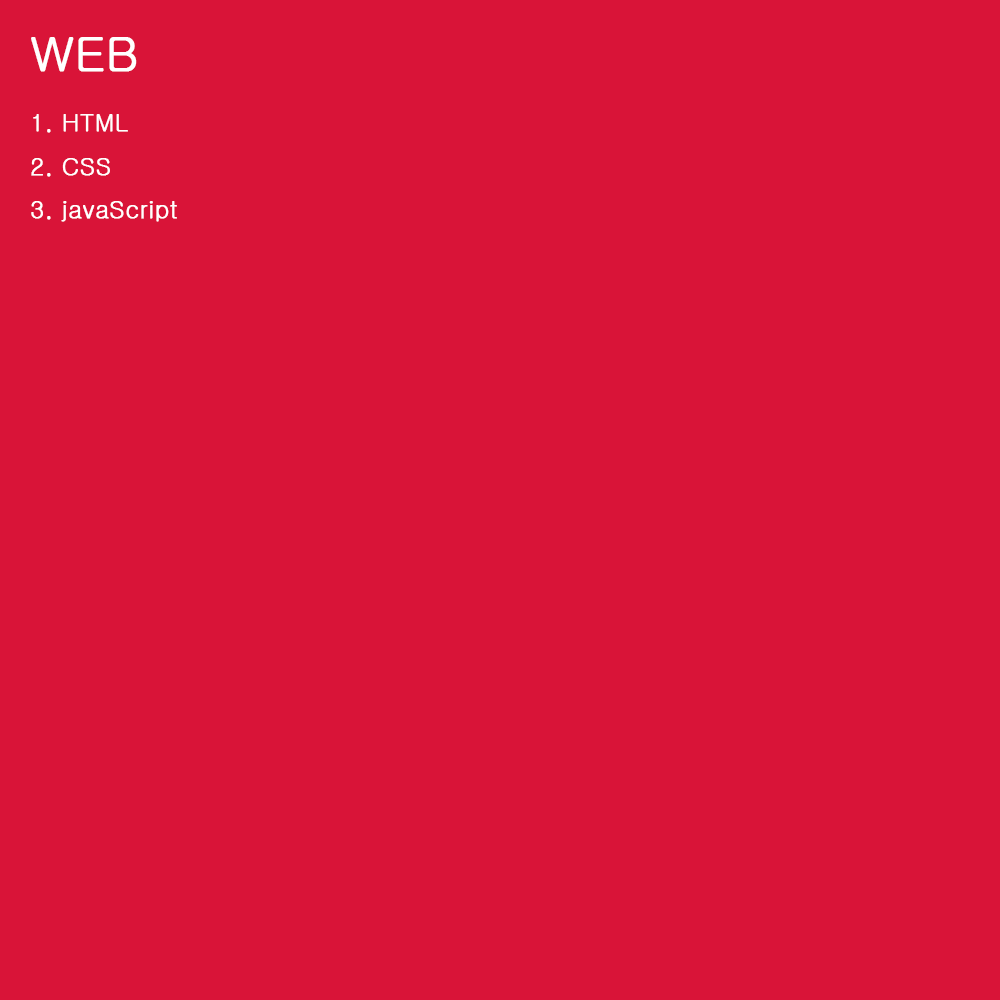
<style>
.page{position:relative;width:1000px;height:1000px;background:#d91438}
.page>*{position:absolute;margin:0}
.t1{font:48px "Gulim";color:#ffffff;font-weight:bold}
.t2{font:24px "Gulim";color:#ffffff;font-weight:bold}
</style>
<div class="page">
<p class="t1" style="left:31px;top:37px;width:106px;height:35px">WEB</p>
<p class="t2" style="left:33px;top:114px;width:95px;height:19px">1. HTML</p>
<p class="t2" style="left:31px;top:158px;width:79px;height:19px">2. CSS</p>
<p class="t2" style="left:31px;top:201px;width:146px;height:21px">3. javaScript</p>
</div>
